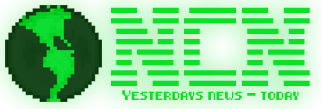
<style>
.page{position:relative;width:322px;height:109px}
.page>*{position:absolute;margin:0}
.t1{font:8.3px "8-bit-pusab";color:#0ee027}
</style>
<div class="page">
<p class="t1" style="left:122px;top:90px;width:177px;height:10px">Yesterdays news - today</p>
</div>
